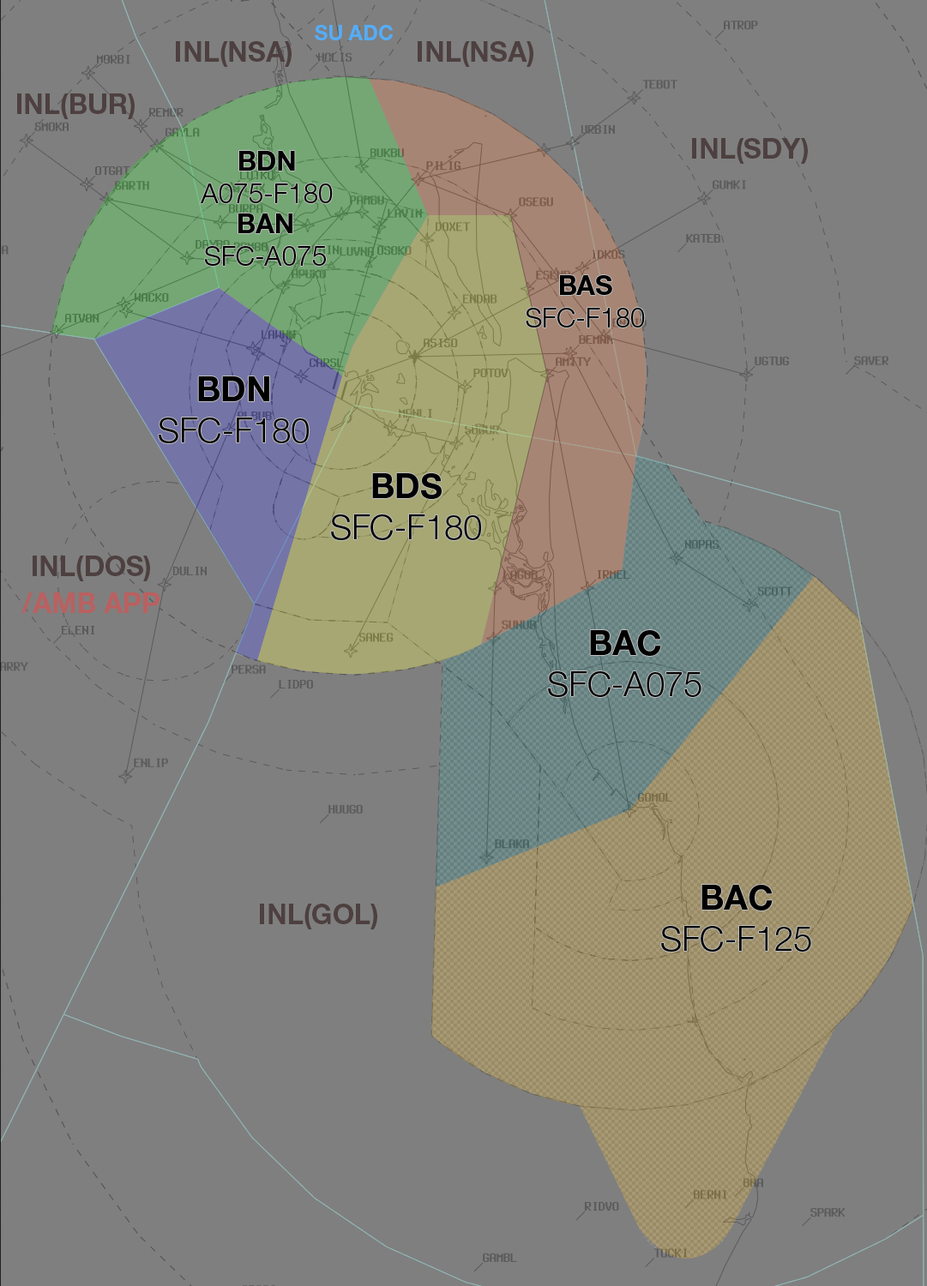
<style>
.page{position:relative;width:927px;height:1286px;background:#7f7f7f}
.page>*{position:absolute;margin:0}
.t1{font:20.5px "HelveticaNeueLTStd-Bd";color:#53adf9}
.t2{font:27.6px "HelveticaNeueLTStd-Bd";color:#4e4040}
.t3{font:27.1px "HelveticaNeueLTStd-Lt";color:#000000}
.t4{font:27.1px "HelveticaNeueLTStd-Bd";color:#000000}
.t5{font:34.3px "HelveticaNeueLTStd-Lt";color:#000000}
.t6{font:34.3px "HelveticaNeueLTStd-Bd";color:#000000}
.t7{font:27.6px "HelveticaNeueLTStd-Bd";color:#ba6060}
</style>
<div class="page">
<p class="t1" style="left:315px;top:25px;width:78px;height:15px">SU ADC</p>
<p class="t2" style="left:176px;top:41px;width:116px;height:26px">INL(NSA)</p>
<p class="t2" style="left:418px;top:41px;width:115px;height:26px">INL(NSA)</p>
<p class="t2" style="left:17px;top:93px;width:118px;height:26px">INL(BUR)</p>
<p class="t2" style="left:692px;top:138px;width:116px;height:26px">INL(SDY)</p>
<p class="t3" style="left:201px;top:151px;width:132px;height:52px;text-align:center"><span class="t4">BDN<br></span>A075-F180</p>
<p class="t3" style="left:205px;top:214px;width:121px;height:52px;text-align:center"><span class="t4">BAN<br></span>SFC-A075</p>
<p class="t3" style="left:526px;top:275px;width:119px;height:53px;text-align:center"><span class="t4">BAS<br></span>SFC-F180</p>
<p class="t5" style="left:159px;top:376px;width:150px;height:67px;text-align:center"><span class="t6">BDN<br></span>SFC-F180</p>
<p class="t5" style="left:331px;top:473px;width:150px;height:67px;text-align:center"><span class="t6">BDS<br></span>SFC-F180</p>
<p class="t2" style="left:33px;top:556px;width:117px;height:25px">INL(DOS)</p>
<p class="t7" style="left:21px;top:593px;width:139px;height:20px">/AMB APP</p>
<p class="t5" style="left:548px;top:630px;width:153px;height:67px;text-align:center"><span class="t6">BAC<br></span>SFC-A075</p>
<p class="t5" style="left:661px;top:885px;width:150px;height:67px;text-align:center"><span class="t6">BAC<br></span>SFC-F125</p>
<p class="t2" style="left:260px;top:904px;width:117px;height:26px">INL(GOL)</p>
</div>
